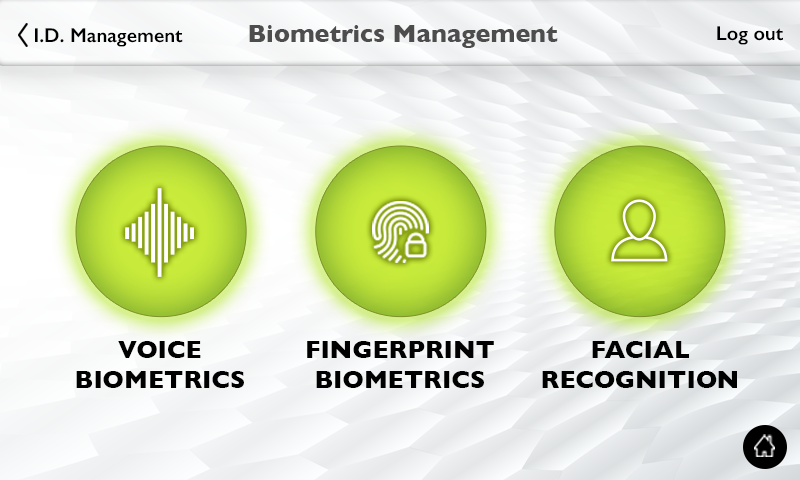
<style>
.page{position:relative;width:800px;height:480px}
.page>*{position:absolute;margin:0}
.t1{font:20px "GillSans-SemiBold";color:#000000}
.t2{font:25px "GillSans-Bold";color:#4d4d4d}
.t3{font:25.1px/30.1px "GillSans-Bold";color:#000000;text-transform:uppercase}
</style>
<div class="page">
<p class="t1" style="left:35px;top:28px;width:148px;height:19px">I.D. Management</p>
<p class="t2" style="left:249px;top:25px;width:309px;height:23px">Biometrics Management</p>
<p class="t1" style="left:717px;top:26px;width:66px;height:19px">Log out</p>
<p class="t3" style="left:76px;top:341px;width:168px;height:47px;text-align:center">Voice<br>Biometrics</p>
<p class="t3" style="left:307px;top:341px;width:187px;height:47px;text-align:center">Fingerprint<br>Biometrics</p>
<p class="t3" style="left:542px;top:341px;width:195px;height:47px;text-align:center">Facial<br>Recognition</p>
</div>
